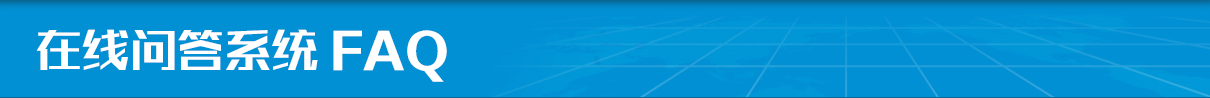
<style>
.page{position:relative;width:1210px;height:98px;background:#0190d4}
.page>*{position:absolute;margin:0}
.t1{font:47px "BigruixianBoldkGBV1.0";color:#ffffff}
.t2{font:47px "FZZDHJW--GB1-0";color:#ffffff}
</style>
<div class="page">
<p class="t1" style="left:36px;top:29px;width:282px;height:41px">在线问答系统</p>
<p class="t2" style="left:333px;top:30px;width:114px;height:52px">FAQ</p>
</div>
